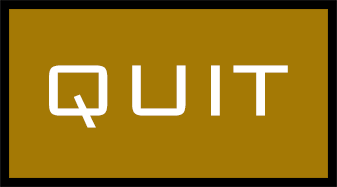
<style>
.page{position:relative;width:337px;height:187px;background:#a47905}
.page>*{position:absolute;margin:0}
.t1{font:96.7px "BankGothic-Light";color:#ffffff}
</style>
<div class="page">
<p class="t1" style="left:49px;top:65px;width:239px;height:63px">QUIT</p>
</div>
